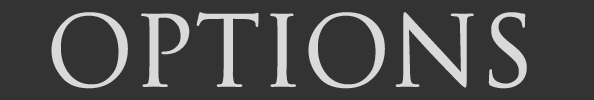
<style>
.page{position:relative;width:594px;height:100px;background:#333333}
.page>*{position:absolute;margin:0}
.t1{font:95.5px "SpaceandAstronomy";color:#d9d9d9}
</style>
<div class="page">
<p class="t1" style="left:51px;top:12px;width:476px;height:77px">OPTIONS</p>
</div>
